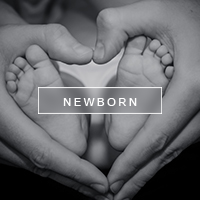
<style>
.page{position:relative;width:200px;height:200px}
.page>*{position:absolute;margin:0}
.t1{font:11.9px "IstokWeb-Regular";letter-spacing:0.2em;color:#ffffff;text-transform:uppercase}
</style>
<div class="page">
<p class="t1" style="left:63px;top:98px;width:74px;height:8px">NEWBORN</p>
</div>
